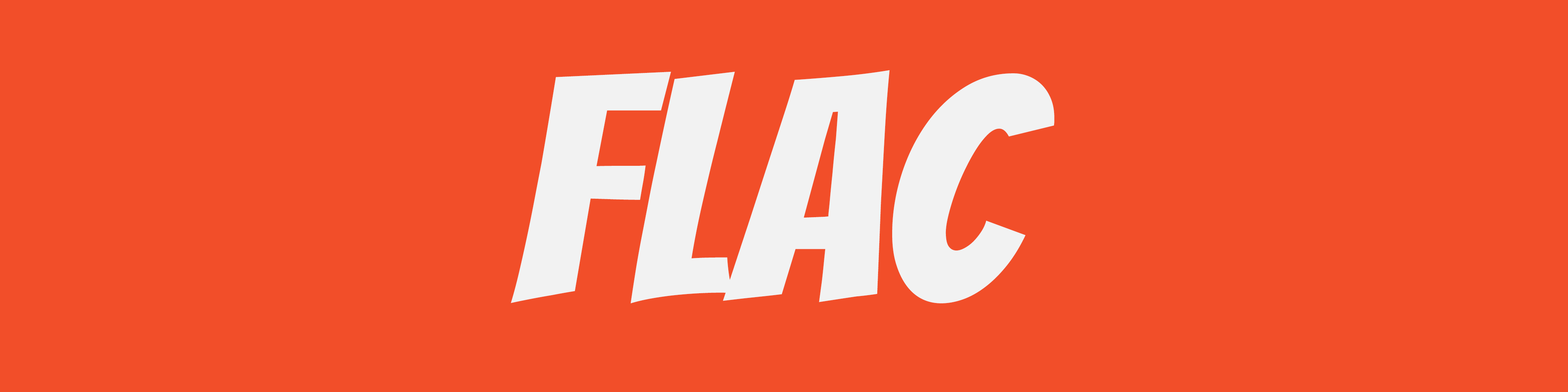
<style>
.page{position:relative;width:1568px;height:392px;background:#f24e29}
.page>*{position:absolute;margin:0}
.t1{font:313.6px "Bangers-Regular";color:#f2f2f2;scale:1.09 1}
</style>
<div class="page">
<p class="t1" style="left:511px;top:70px;width:543px;height:233px">Flac</p>
</div>
